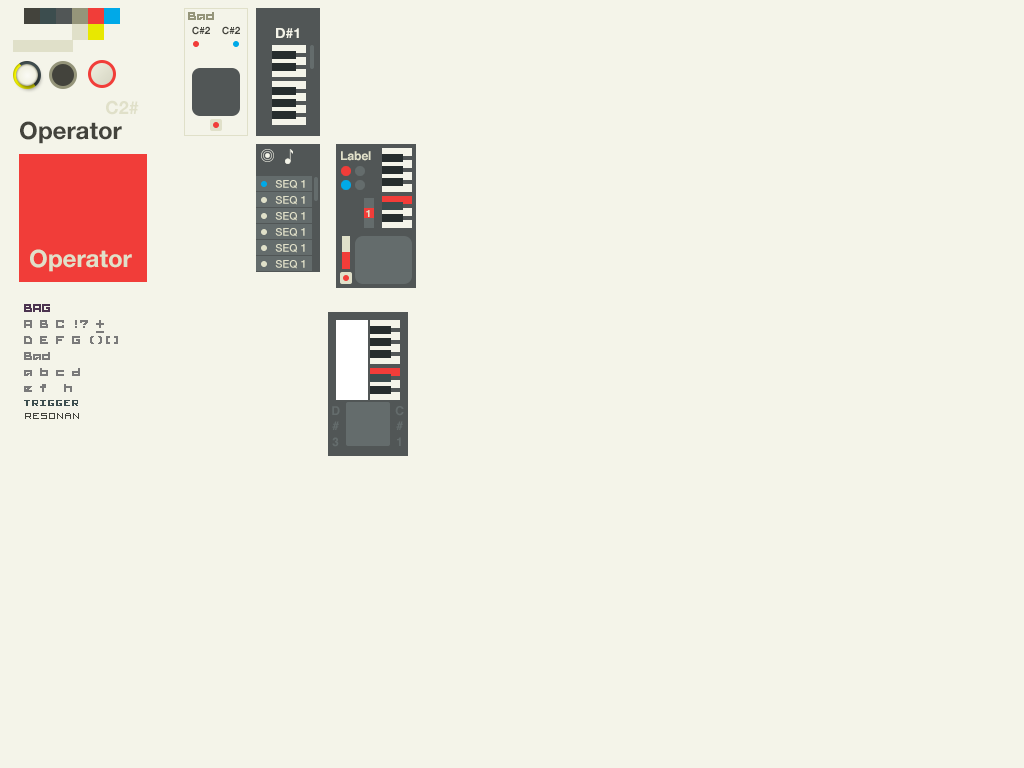
<style>
.page{position:relative;width:1024px;height:768px;background:#f4f4e9}
.page>*{position:absolute;margin:0}
.t1{font:10px "HelveticaNeue-Bold";color:#43433c}
.t2{font:14px "HelveticaNeue-Bold";color:#f4f4e9}
.t3{font:18px "HelveticaNeue-Bold";color:#e0e0c9}
.t4{font:24px "HelveticaNeue-Bold";color:#43433c}
.t5{font:12px "Helvetica-Bold";color:#e0e0c9}
.t6{font:11px "HelveticaNeue-Medium";color:#e0e0c9}
.t7{font:10px "Helvetica-Bold";color:#e0e0c9}
.t8{font:24px "HelveticaNeue-Bold";color:#e0e0c9}
.t9{font:12px "Helvetica-Bold";color:#646c6c}
</style>
<div class="page">
<p class="t1" style="left:192px;top:26px;width:18px;height:9px">C#2</p>
<p class="t1" style="left:222px;top:26px;width:18px;height:9px">C#2</p>
<p class="t2" style="left:276px;top:28px;width:23px;height:10px">D#1</p>
<p class="t3" style="left:106px;top:100px;width:33px;height:15px">C2#</p>
<p class="t4" style="left:20px;top:121px;width:102px;height:23px">Operator</p>
<p class="t5" style="left:341px;top:151px;width:30px;height:10px">Label</p>
<p class="t6" style="left:275px;top:180px;width:30px;height:9px">SEQ 1</p>
<p class="t6" style="left:275px;top:196px;width:30px;height:9px">SEQ 1</p>
<p class="t6" style="left:275px;top:212px;width:30px;height:9px">SEQ 1</p>
<p class="t7" style="left:366px;top:210px;width:4px;height:7px">1</p>
<p class="t6" style="left:275px;top:228px;width:30px;height:9px">SEQ 1</p>
<p class="t6" style="left:275px;top:244px;width:30px;height:9px">SEQ 1</p>
<p class="t8" style="left:30px;top:249px;width:102px;height:23px">Operator</p>
<p class="t6" style="left:275px;top:260px;width:30px;height:9px">SEQ 1</p>
<p class="t9" style="left:332px;top:406px;width:8px;height:9px">D</p>
<p class="t9" style="left:395px;top:406px;width:9px;height:10px">C</p>
<p class="t9" style="left:332px;top:421px;width:7px;height:9px">#</p>
<p class="t9" style="left:396px;top:421px;width:7px;height:9px">#</p>
<p class="t9" style="left:332px;top:437px;width:7px;height:10px">3</p>
<p class="t9" style="left:397px;top:437px;width:4px;height:9px">1</p>
</div>
